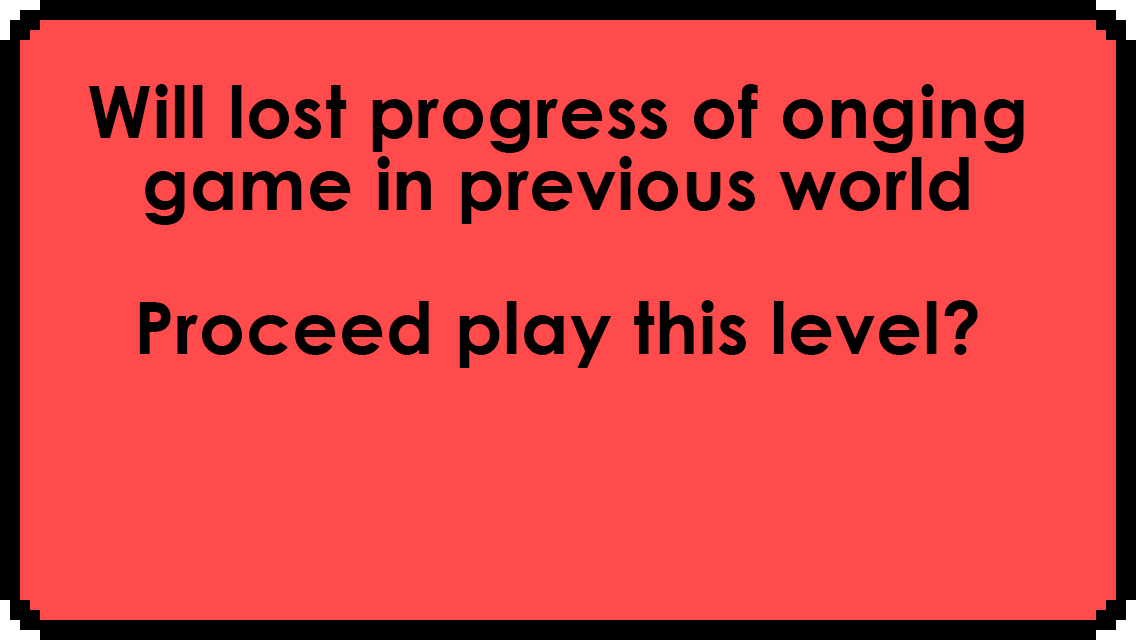
<style>
.page{position:relative;width:1136px;height:640px;background:#ff4b4b}
.page>*{position:absolute;margin:0}
.t1{font:72px/72px "CenturyGothic-Bold";letter-spacing:0.01em;color:#000000}
</style>
<div class="page">
<p class="t1" style="left:89px;top:84px;width:935px;height:284px;text-align:center">Will lost progress of onging game in previous world<br><br>Proceed play this level?</p>
</div>
